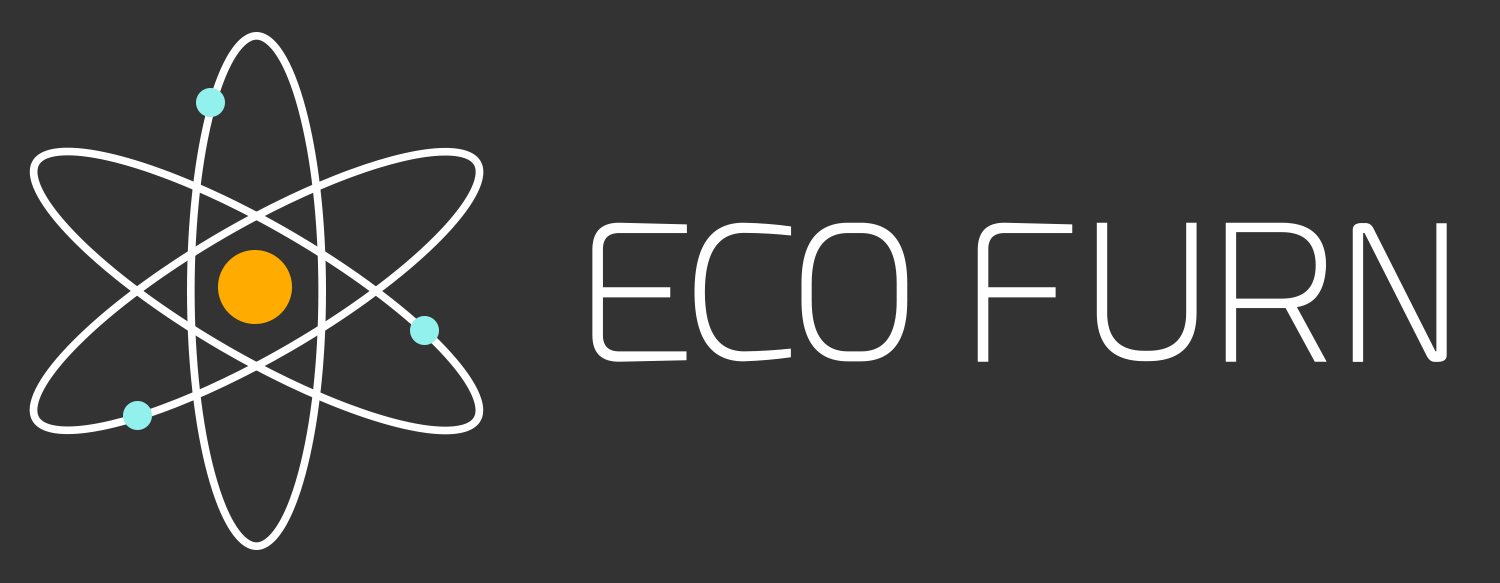
<style>
.page{position:relative;width:1500px;height:583px;background:#333333}
.page>*{position:absolute;margin:0}
.t1{font:186.8px "Esphimere-Light";color:#ffffff}
</style>
<div class="page">
<p class="t1" style="left:592px;top:222px;width:855px;height:140px">ECO FURN</p>
</div>
